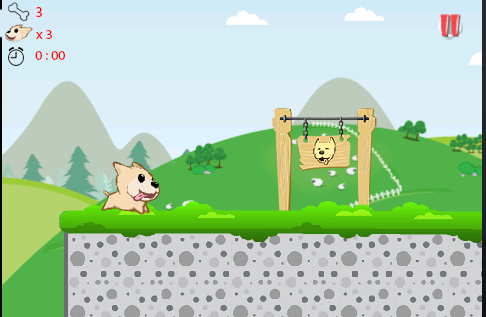
<style>
.page{position:relative;width:486px;height:317px}
.page>*{position:absolute;margin:0}
.t1{font:14px "MyriadPro-Regular";color:#ff0000}
.t2{font:13.9px "MyriadPro-Regular";color:#ff0000}
</style>
<div class="page">
<p class="t1" style="left:36px;top:7px;width:6px;height:10px">3</p>
<p class="t2" style="left:36px;top:30px;width:16px;height:9px">x 3</p>
<p class="t2" style="left:35px;top:51px;width:30px;height:9px">0 : 00</p>
</div>
